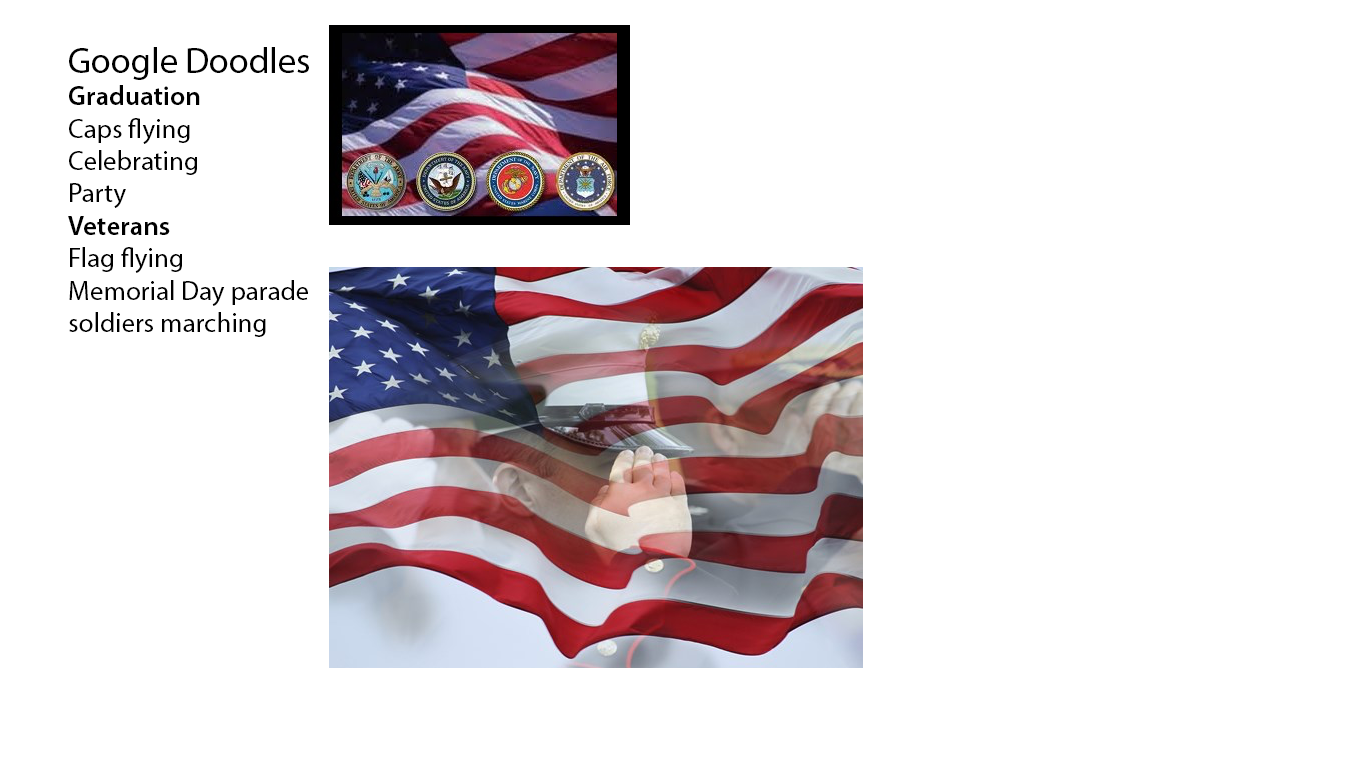
<style>
.page{position:relative;width:1366px;height:768px;background:#ffffff}
.page>*{position:absolute;margin:0}
.t1{font:27px "MyriadPro-Regular";color:#000000}
.t2{font:36px "MyriadPro-Regular";color:#000000}
.t3{font:27px "MyriadPro-Semibold";color:#000000}
</style>
<div class="page">
<p class="t1" style="left:68px;top:47px;width:241px;height:290px"><span class="t2">Google Doodles <br></span><span class="t3">Graduation<br></span>Caps flying<br>Celebrating<br>Party<br><span class="t3">Veterans <br></span>Flag flying<br>Memorial Day parade<br>soldiers marching</p>
</div>
